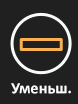
<style>
.page{position:relative;width:78px;height:104px;background:#202020}
.page>*{position:absolute;margin:0}
.t1{font:12px "Calibri-Bold";color:#ffffff}
</style>
<div class="page">
<p class="t1" style="left:11px;top:83px;width:60px;height:11px">Уменьш.</p>
</div>
